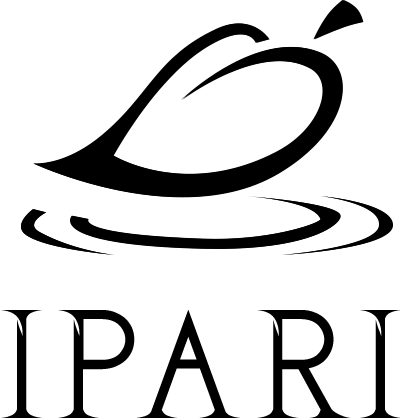
<style>
.page{position:relative;width:400px;height:418px;background:#ffffff}
.page>*{position:absolute;margin:0}
.t1{font:150px "Rachels_Requiem";letter-spacing:0.08em;color:#000000}
</style>
<div class="page">
<p class="t1" style="left:1px;top:310px;width:399px;height:108px">IPARI</p>
</div>
